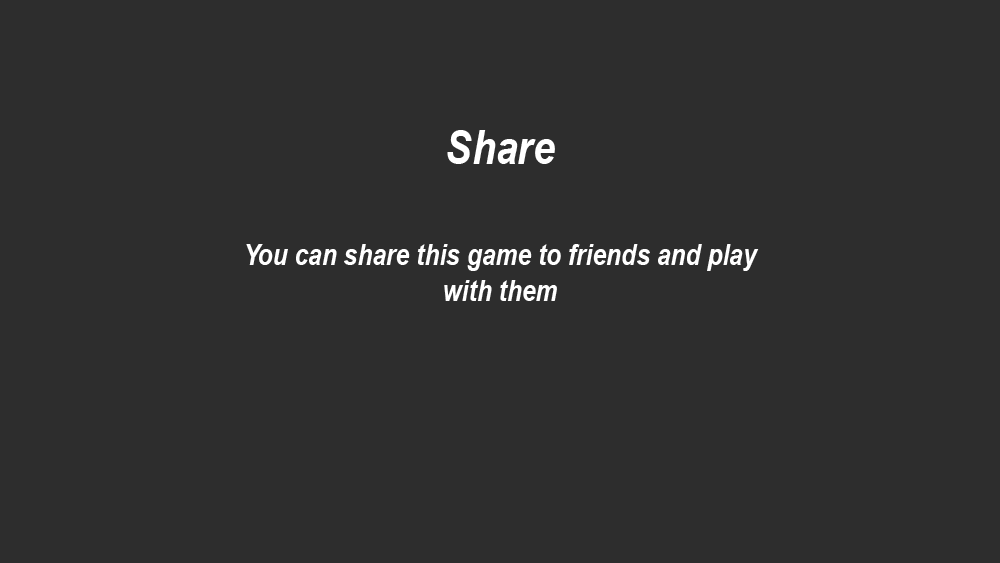
<style>
.page{position:relative;width:1000px;height:563px;background:#2d2d2d}
.page>*{position:absolute;margin:0}
.t1{font:48px "ArialNarrow-BoldItalic";color:#ffffff}
.t2{font:30px "ArialNarrow-BoldItalic";color:#ffffff}
</style>
<div class="page">
<p class="t1" style="left:447px;top:130px;width:108px;height:34px">Share</p>
<p class="t2" style="left:246px;top:244px;width:513px;height:57px;text-align:center">You can share this game to friends and play with them</p>
</div>
